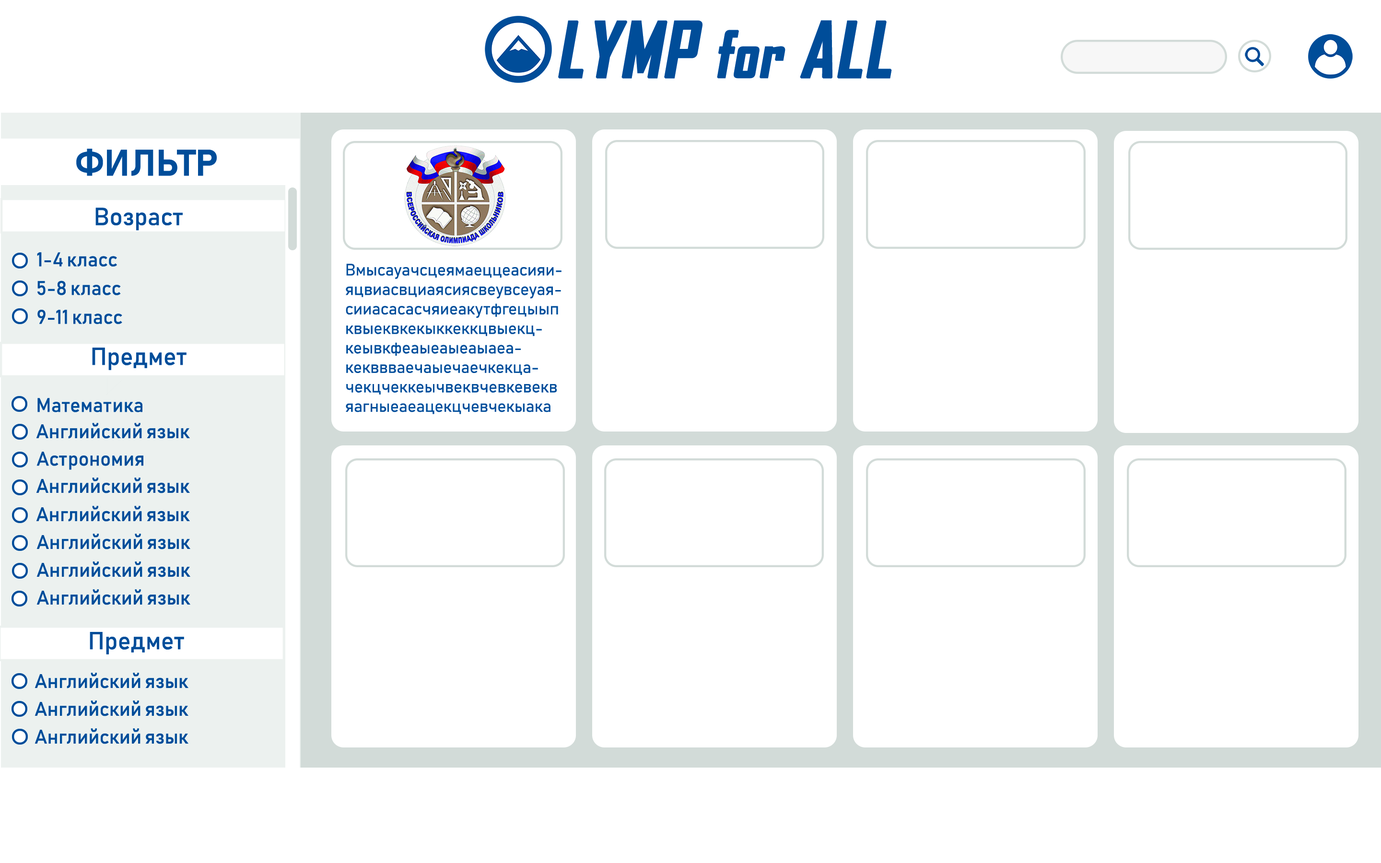
<style>
.page{position:relative;width:1381px;height:863px;background:#ffffff}
.page>*{position:absolute;margin:0}
.t1{font:73.1px "AgencyFB-Bold";color:#004d99;font-weight:bold;font-style:italic}
.t2{font:60.9px "AgencyFB-Bold";color:#004d99;font-weight:bold;font-style:italic}
.t3{font:36.5px "Bahnschrift-Bold";color:#004d99;font-weight:bold;font-style:italic}
.t4{font:24.4px "Bahnschrift";color:#004d99;font-weight:bold;font-style:italic}
.t5{font:19.5px "Bahnschrift";color:#004d99;font-weight:bold;font-style:italic}
.t6{font:16.2px "Bahnschrift-SemiLight";color:#004d99;font-weight:bold;font-style:italic}
</style>
<div class="page">
<p class="t1" style="left:558px;top:20px;width:334px;height:59px">LYMP <span class="t2">for</span> ALL</p>
<p class="t3" style="left:76px;top:149px;width:141px;height:27px">ФИЛЬТР</p>
<p class="t4" style="left:95px;top:208px;width:88px;height:23px">Возраст</p>
<p class="t5" style="left:37px;top:252px;width:80px;height:15px">1-4 класс</p>
<p class="t6" style="left:346px;top:264px;width:216px;height:150px">Вмысауачсцеямаеццеасияияцвиасвциаясиясвеувсеуаясииасасасчяиеакутфгецыып квыеквкекыккеккцвыекцкеывкфеаыеаыеаыаеакекввваечаыечаечкекцачекцчеккеычвеквчевкевеквяагныеаеацекцчевчекыакаыа</p>
<p class="t5" style="left:37px;top:281px;width:84px;height:14px">5-8 класс</p>
<p class="t5" style="left:37px;top:310px;width:85px;height:14px">9-11 класс</p>
<p class="t4" style="left:92px;top:348px;width:95px;height:22px">Предмет</p>
<p class="t5" style="left:37px;top:398px;width:105px;height:14px">Математика</p>
<p class="t5" style="left:36px;top:423px;width:154px;height:16px">Английский язык</p>
<p class="t5" style="left:36px;top:452px;width:107px;height:18px">Астрономия</p>
<p class="t5" style="left:36px;top:478px;width:154px;height:16px">Английский язык</p>
<p class="t5" style="left:36px;top:506px;width:154px;height:16px">Английский язык</p>
<p class="t5" style="left:36px;top:534px;width:154px;height:16px">Английский язык</p>
<p class="t5" style="left:36px;top:562px;width:154px;height:15px">Английский язык</p>
<p class="t5" style="left:36px;top:589px;width:154px;height:16px">Английский язык</p>
<p class="t4" style="left:90px;top:632px;width:94px;height:23px">Предмет</p>
<p class="t5" style="left:35px;top:673px;width:153px;height:16px">Английский язык</p>
<p class="t5" style="left:35px;top:701px;width:153px;height:16px">Английский язык</p>
<p class="t5" style="left:35px;top:729px;width:153px;height:15px">Английский язык</p>
</div>
